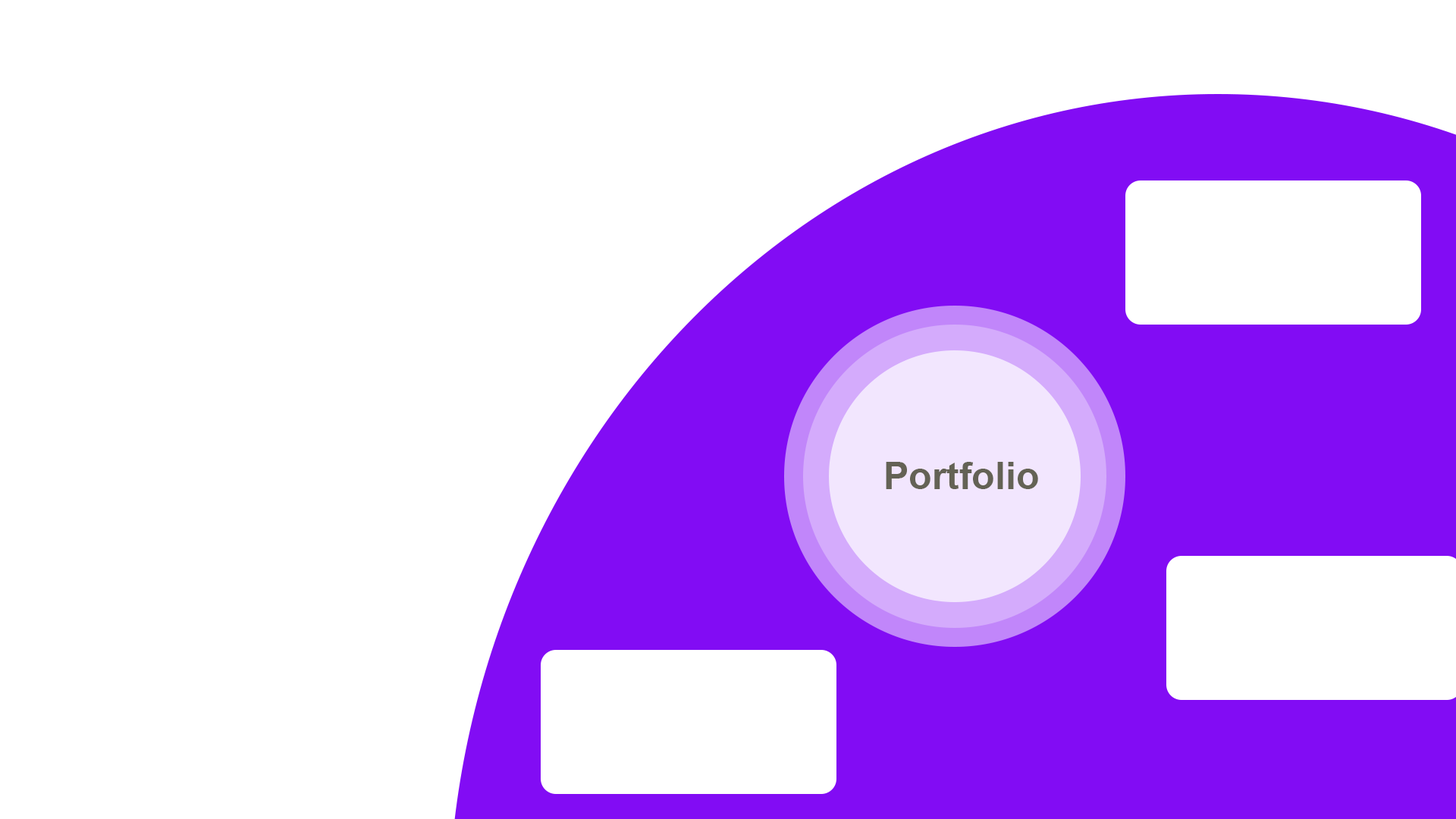
<style>
.page{position:relative;width:1456px;height:819px;background:#ffffff}
.page>*{position:absolute;margin:0}
.t1{font:37.9px "Arial-BoldMT";color:#646255}
</style>
<div class="page">
<p class="t1" style="left:886px;top:462px;width:152px;height:27px">Portfolio</p>
</div>
